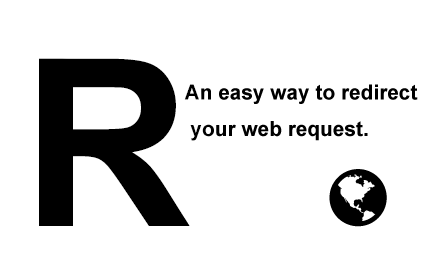
<style>
.page{position:relative;width:440px;height:280px;background:#ffffff}
.page>*{position:absolute;margin:0}
.t1{font:233.3px "Arial-BoldMT";color:#000000}
.t2{font:20.8px "Arial-BoldMT";color:#000000}
</style>
<div class="page">
<p class="t1" style="left:39px;top:58px;width:151px;height:168px">R</p>
<p class="t2" style="left:184px;top:84px;width:234px;height:57px">An easy way to redirect<br> your web request.</p>
</div>
